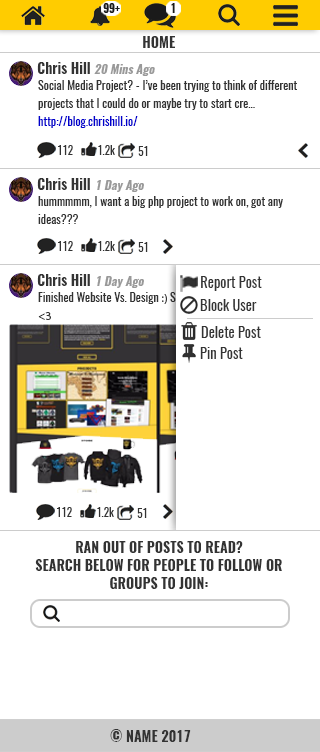
<style>
.page{position:relative;width:320px;height:752px;background:#ffffff}
.page>*{position:absolute;margin:0}
.t1{font:11px "Oswald-Bold";color:#1a1a1a;text-transform:uppercase}
.t2{font:14px "Oswald-Bold";color:#333333;text-transform:uppercase}
.t3{font:14px "Oswald-Bold";color:#333333}
.t4{font:12px "Oswald-Bold";color:#999999;font-style:italic}
.t5{font:12px/18px "Oswald-Regular";color:#333333}
.t6{font:12px/18px "Oswald-Regular";color:#0000cc}
.t7{font:11px "Oswald-Regular";color:#333333}
.t8{font:14.4px "Oswald-Regular";color:#333333}
.t9{font:12px/18px "MyriadPro-Regular";color:#333333}
.t10{font:14px/18px "Oswald-Bold";color:#333333;text-transform:uppercase}
</style>
<div class="page">
<p class="t1" style="left:171px;top:3px;width:4px;height:10px">1</p>
<p class="t2" style="left:143px;top:36px;width:32px;height:12px">Home</p>
<p class="t3" style="left:37px;top:62px;width:53px;height:12px">Chris Hill</p>
<p class="t4" style="left:94px;top:64px;width:61px;height:12px">20 Mins Ago</p>
<p class="t5" style="left:38px;top:80px;width:259px;height:48px">Social Media Project? - I’ve been trying to think of different projects that I could do or maybe try to start cre... <span class="t6">http://blog.chrishill.io/</span></p>
<p class="t7" style="left:58px;top:145px;width:15px;height:10px">112</p>
<p class="t7" style="left:98px;top:145px;width:17px;height:10px">1.2k</p>
<p class="t7" style="left:138px;top:146px;width:10px;height:10px">51</p>
<p class="t3" style="left:37px;top:178px;width:53px;height:12px">Chris Hill</p>
<p class="t4" style="left:97px;top:180px;width:47px;height:12px">1 Day Ago</p>
<p class="t5" style="left:38px;top:196px;width:245px;height:28px">hummmmm, I want a big php project to work on, got any ideas???</p>
<p class="t7" style="left:58px;top:241px;width:15px;height:10px">112</p>
<p class="t7" style="left:98px;top:241px;width:17px;height:10px">1.2k</p>
<p class="t7" style="left:138px;top:242px;width:10px;height:10px">51</p>
<p class="t3" style="left:37px;top:274px;width:53px;height:12px">Chris Hill</p>
<p class="t4" style="left:97px;top:276px;width:47px;height:12px">1 Day Ago</p>
<p class="t8" style="left:201px;top:276px;width:61px;height:15px">Report Post</p>
<p class="t5" style="left:38px;top:292px;width:252px;height:28px">Finished Website Vs. Design <span class="t9">:)</span> So Happy with the result <span class="t9">:D &lt;3</span></p>
<p class="t8" style="left:200px;top:299px;width:57px;height:12px">Block User</p>
<p class="t8" style="left:201px;top:326px;width:60px;height:12px">Delete Post</p>
<p class="t8" style="left:200px;top:347px;width:43px;height:12px">Pin Post</p>
<p class="t7" style="left:57px;top:507px;width:15px;height:10px">112</p>
<p class="t7" style="left:97px;top:507px;width:17px;height:10px">1.2k</p>
<p class="t7" style="left:137px;top:508px;width:10px;height:10px">51</p>
<p class="t10" style="left:35px;top:541px;width:247px;height:48px;text-align:center">Ran out of Posts to read?<br>sEARCH BELOW FOR pEOPLE TO FOLLOW OR<br>GROUPS TO JOIN:</p>
<p class="t2" style="left:110px;top:729px;width:81px;height:13px">© Name 2017</p>
</div>
